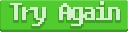
<style>
.page{position:relative;width:128px;height:32px;background:#50cc2f}
.page>*{position:absolute;margin:0}
.t1{font:30.5px "Fixedsys";color:#d4f0cc;scale:1.05 1}
</style>
<div class="page">
<p class="t1" style="left:10px;top:1px;width:110px;height:25px">Try Again</p>
</div>
